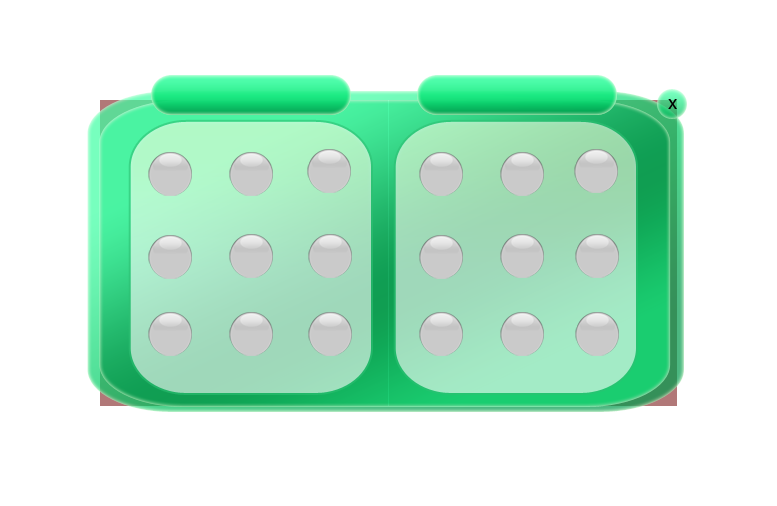
<style>
.page{position:relative;width:777px;height:506px;background:#ffffff}
.page>*{position:absolute;margin:0}
.t1{font:20px "MyriadPro-Regular";color:#000000}
</style>
<div class="page">
<p class="t1" style="left:668px;top:99px;width:9px;height:10px">x</p>
</div>
